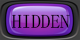
<style>
.page{position:relative;width:80px;height:40px}
.page>*{position:absolute;margin:0}
.t1{font:19px "SimSun";color:#000000}
</style>
<div class="page">
<p class="t1" style="left:12px;top:14px;width:58px;height:14px">HIDDEN</p>
</div>
